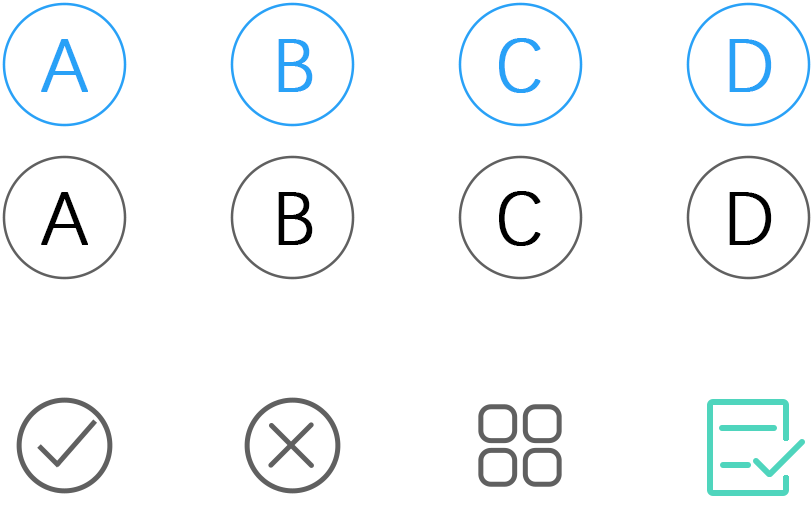
<style>
.page{position:relative;width:812px;height:509px;background:#ffffff}
.page>*{position:absolute;margin:0}
.t1{font:74.9px "DengXian-Light";color:#29a1f7;font-weight:bold}
.t2{font:74.9px "DengXian-Light";color:#000000;font-weight:bold}
</style>
<div class="page">
<p class="t1" style="left:41px;top:39px;width:47px;height:53px">A</p>
<p class="t1" style="left:278px;top:39px;width:35px;height:53px">B</p>
<p class="t1" style="left:499px;top:38px;width:42px;height:55px">C</p>
<p class="t1" style="left:729px;top:39px;width:43px;height:53px">D</p>
<p class="t2" style="left:41px;top:192px;width:47px;height:53px">A</p>
<p class="t2" style="left:278px;top:192px;width:35px;height:53px">B</p>
<p class="t2" style="left:499px;top:191px;width:42px;height:55px">C</p>
<p class="t2" style="left:729px;top:192px;width:43px;height:53px">D</p>
</div>
